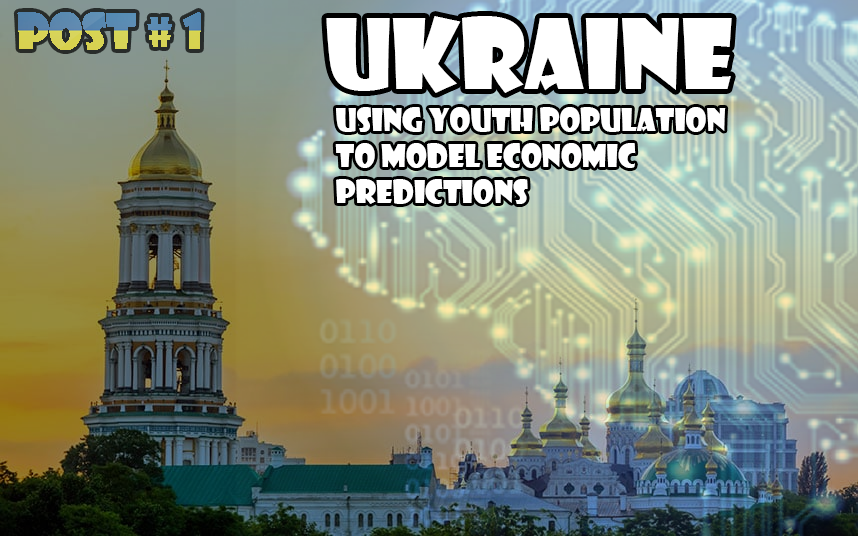
<style>
.page{position:relative;width:858px;height:536px}
.page>*{position:absolute;margin:0}
.t1{font:95px "ShowcardGothic-Reg";color:#ffffff}
.t2{font:30px "ShowcardGothic-Reg";color:#ffffff}
</style>
<div class="page">
<p class="t1" style="left:326px;top:16px;width:406px;height:77px">Ukraine</p>
<p class="t2" style="left:335px;top:107px;width:391px;height:97px">Using Youth population <br>to model economic<br>predictions</p>
</div>
